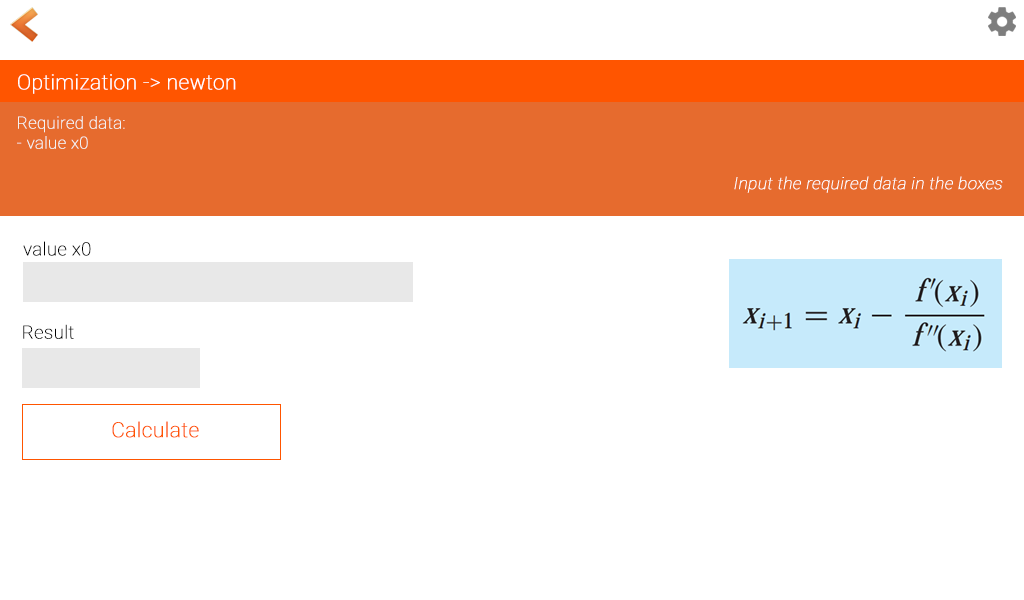
<style>
.page{position:relative;width:1024px;height:600px;background:#ffffff}
.page>*{position:absolute;margin:0}
.t1{font:20.8px "Roboto-Thin";color:#ffffff;font-weight:bold}
.t2{font:16.7px "Roboto-Thin";color:#f3f3f3;font-weight:bold}
.t3{font:16.7px "Roboto-Thin";color:#ffffff;font-weight:bold;font-style:italic}
.t4{font:18.3px "Roboto-Thin";color:#000000;font-weight:bold}
.t5{font:20.8px "Roboto-Thin";color:#ff5500;font-weight:bold}
</style>
<div class="page">
<p class="t1" style="left:18px;top:74px;width:218px;height:20px">Optimization -&gt; newton</p>
<p class="t2" style="left:17px;top:116px;width:108px;height:33px">Required data:<br>- value x0</p>
<p class="t3" style="left:734px;top:176px;width:269px;height:17px">Input the required data in the boxes</p>
<p class="t4" style="left:23px;top:241px;width:68px;height:15px">value x0</p>
<p class="t4" style="left:23px;top:324px;width:51px;height:15px">Result</p>
<p class="t5" style="left:112px;top:421px;width:87px;height:17px">Calculate</p>
</div>
